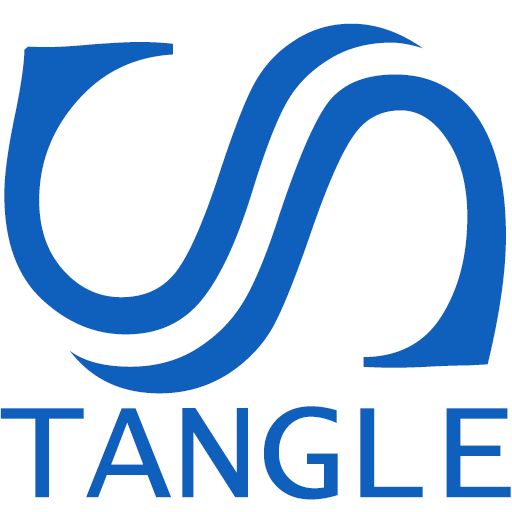
<style>
.page{position:relative;width:512px;height:512px;background:#ffffff}
.page>*{position:absolute;margin:0}
.t1{font:935.5px "ColonnaMT";color:#0e60bc}
.t2{font:141.6px "LucidaConsole";color:#0e60bc}
</style>
<div class="page">
<p class="t1" style="left:4px;top:23px;width:502px;height:371px;rotate:90deg">S</p>
<p class="t2" style="left:0px;top:406px;width:511px;height:94px">TANGLE</p>
</div>
